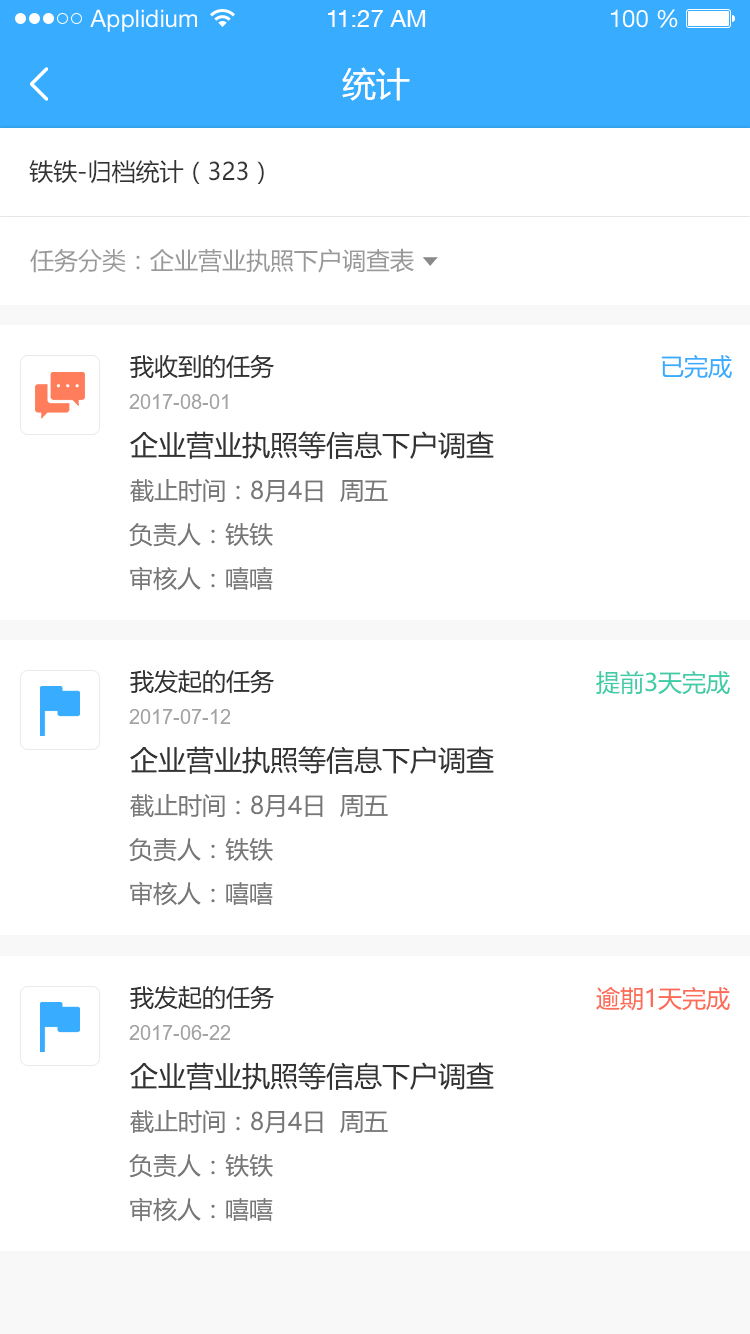
<style>
.page{position:relative;width:750px;height:1334px;background:#ffffff}
.page>*{position:absolute;margin:0}
.t1{font:24px "HelveticaNeueLTStd-Roman";color:#ffffff}
.t2{font:24px "HelveticaNeueCE-Roman";color:#ffffff}
.t3{font:34px "MicrosoftYaHei";color:#ffffff}
.t4{font:24px "MicrosoftYaHei";color:#333333}
.t5{font:24px "MicrosoftYaHei";color:#999999}
.t6{font:24px "MicrosoftYaHei";color:#38adff}
.t7{font:20px "ArialMT";color:#a3a3a3}
.t8{font:28px "MicrosoftYaHei";color:#333333}
.t9{font:24px "MicrosoftYaHei";color:#777777}
.t10{font:24px "MicrosoftYaHei";color:#3fcca7}
.t11{font:24px "MicrosoftYaHei";color:#fd6c57}
</style>
<div class="page">
<p class="t1" style="left:90px;top:9px;width:107px;height:23px">Applidium</p>
<p class="t2" style="left:328px;top:10px;width:98px;height:17px">11:27 AM</p>
<p class="t1" style="left:611px;top:9px;width:67px;height:19px">100 %</p>
<p class="t3" style="left:342px;top:67px;width:68px;height:34px">统计</p>
<p class="t4" style="left:29px;top:160px;width:235px;height:24px">铁铁-归档统计（323）</p>
<p class="t5" style="left:30px;top:248px;width:384px;height:25px">任务分类：企业营业执照下户调查表</p>
<p class="t4" style="left:130px;top:354px;width:144px;height:25px">我收到的任务</p>
<p class="t6" style="left:661px;top:355px;width:71px;height:23px">已完成</p>
<p class="t7" style="left:129px;top:394px;width:99px;height:15px">2017-08-01</p>
<p class="t8" style="left:130px;top:431px;width:364px;height:28px">企业营业执照等信息下户调查</p>
<p class="t9" style="left:130px;top:479px;width:258px;height:24px">截止时间：8月4日  周五</p>
<p class="t9" style="left:129px;top:523px;width:144px;height:24px">负责人：铁铁</p>
<p class="t9" style="left:130px;top:566px;width:143px;height:25px">审核人：嘻嘻</p>
<p class="t4" style="left:130px;top:669px;width:144px;height:25px">我发起的任务</p>
<p class="t10" style="left:596px;top:671px;width:134px;height:24px">提前3天完成</p>
<p class="t7" style="left:129px;top:709px;width:101px;height:15px">2017-07-12</p>
<p class="t8" style="left:130px;top:746px;width:364px;height:28px">企业营业执照等信息下户调查</p>
<p class="t9" style="left:130px;top:794px;width:258px;height:24px">截止时间：8月4日  周五</p>
<p class="t9" style="left:129px;top:838px;width:144px;height:24px">负责人：铁铁</p>
<p class="t9" style="left:130px;top:881px;width:143px;height:25px">审核人：嘻嘻</p>
<p class="t4" style="left:130px;top:985px;width:144px;height:25px">我发起的任务</p>
<p class="t11" style="left:596px;top:987px;width:134px;height:24px">逾期1天完成</p>
<p class="t7" style="left:129px;top:1025px;width:101px;height:15px">2017-06-22</p>
<p class="t8" style="left:130px;top:1062px;width:364px;height:28px">企业营业执照等信息下户调查</p>
<p class="t9" style="left:130px;top:1110px;width:258px;height:24px">截止时间：8月4日  周五</p>
<p class="t9" style="left:129px;top:1154px;width:144px;height:24px">负责人：铁铁</p>
<p class="t9" style="left:130px;top:1197px;width:143px;height:25px">审核人：嘻嘻</p>
</div>
